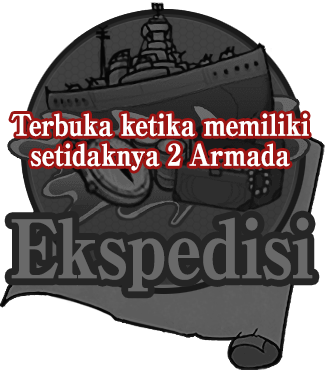
<style>
.page{position:relative;width:325px;height:370px;background:#ffffff}
.page>*{position:absolute;margin:0}
.t1{font:29px/30px "RyuminPro-ExBold";letter-spacing:-0.04em;color:#ffffff;font-weight:bold;scale:0.9 1}
.t2{font:80px "RyuminPro-ExBold";letter-spacing:-0.04em;color:#696969;font-weight:bold;scale:0.9 1}
</style>
<div class="page">
<p class="t1" style="left:11px;top:113px;width:298px;height:58px;text-align:center">Terbuka ketika memiliki<br>setidaknya 2 Armada</p>
<p class="t2" style="left:11px;top:217px;width:302px;height:75px">Ekspedisi</p>
</div>
